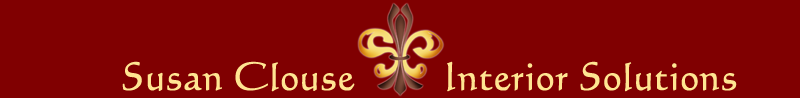
<style>
.page{position:relative;width:800px;height:98px;background:#800001}
.page>*{position:absolute;margin:0}
.t1{font:37.5px "Calligraphic421BT-RomanB";color:#ffe592;font-weight:bold}
</style>
<div class="page">
<p class="t1" style="left:122px;top:61px;width:615px;height:31px">Susan Clouse         Interior Solutions</p>
</div>
